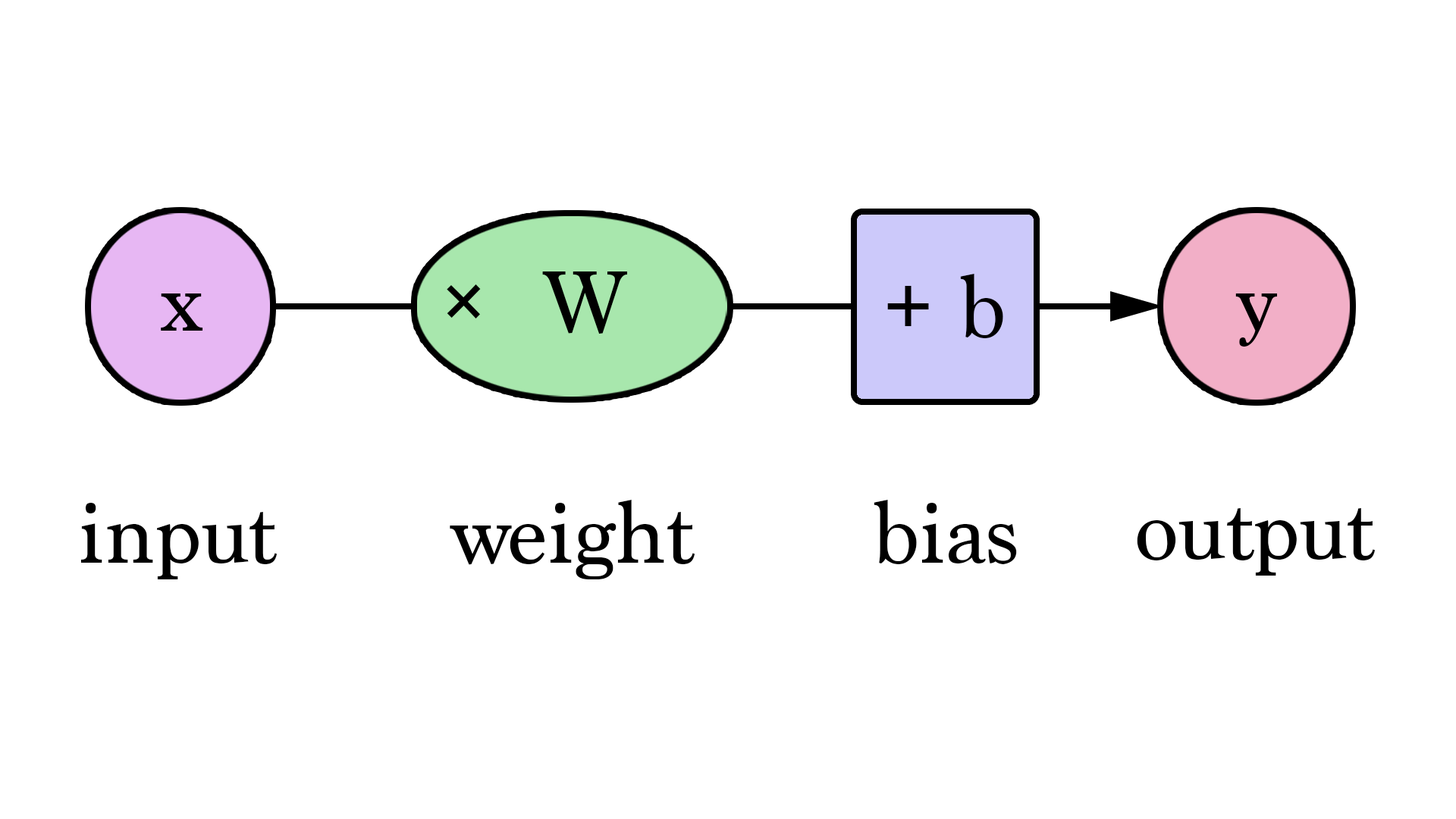
<style>
.page{position:relative;width:1456px;height:819px;background:#ffffff}
.page>*{position:absolute;margin:0}
.t1{font:91px "Marion-Regular";color:#000000}
</style>
<div class="page">
<p class="t1" style="left:447px;top:271px;width:180px;height:63px">×  W</p>
<p class="t1" style="left:887px;top:274px;width:116px;height:64px">+ b</p>
<p class="t1" style="left:161px;top:293px;width:42px;height:38px">x</p>
<p class="t1" style="left:1235px;top:293px;width:42px;height:54px">y</p>
<p class="t1" style="left:80px;top:503px;width:198px;height:76px">input</p>
<p class="t1" style="left:450px;top:500px;width:245px;height:79px">weight</p>
<p class="t1" style="left:874px;top:500px;width:143px;height:64px">bias</p>
<p class="t1" style="left:1137px;top:508px;width:239px;height:68px">output</p>
</div>
